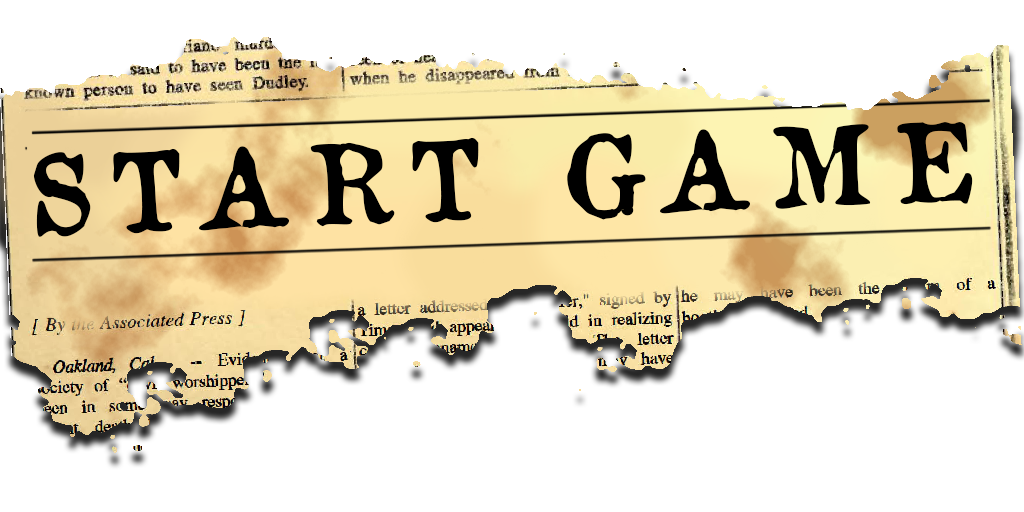
<style>
.page{position:relative;width:1024px;height:512px;background:#ffffff}
.page>*{position:absolute;margin:0}
.t1{font:108px "OldNewspaperTypes";letter-spacing:0.18em;color:#000000}
</style>
<div class="page">
<p class="t1" style="left:33px;top:122px;width:940px;height:115px;rotate:-2deg">START GAME</p>
</div>
